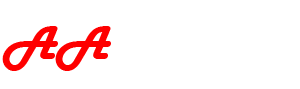
<style>
.page{position:relative;width:300px;height:89px;background:#ffffff}
.page>*{position:absolute;margin:0}
.t1{font:50px "HarlowSolid";color:#fe0000}
</style>
<div class="page">
<p class="t1" style="left:2px;top:26px;width:109px;height:45px">AA</p>
</div>
